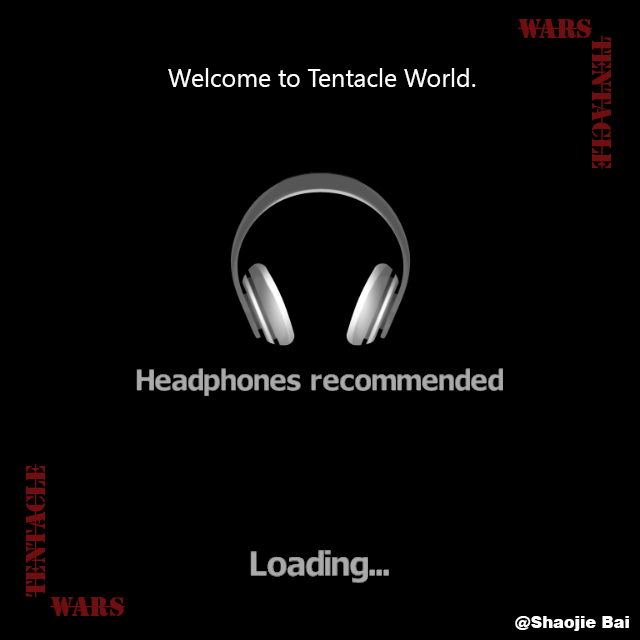
<style>
.page{position:relative;width:640px;height:640px;background:#000000}
.page>*{position:absolute;margin:0}
.t1{font:25px "StencilStd";color:#6f0f0f}
.t2{font:25px "SegoeUISymbol";color:#ffffff}
.t3{font:16px "Swiss721BT-Black";color:#ffffff}
</style>
<div class="page">
<p class="t1" style="left:517px;top:19px;width:75px;height:19px">WARS</p>
<p class="t1" style="left:592px;top:35px;width:19px;height:134px;rotate:90deg">Tentacle</p>
<p class="t2" style="left:168px;top:68px;width:308px;height:19px">Welcome to Tentacle World.</p>
<p class="t1" style="left:26px;top:464px;width:19px;height:133px;rotate:-90deg">Tentacle</p>
<p class="t1" style="left:50px;top:597px;width:75px;height:19px">Wars</p>
<p class="t3" style="left:515px;top:616px;width:114px;height:15px">@Shaojie Bai</p>
</div>
